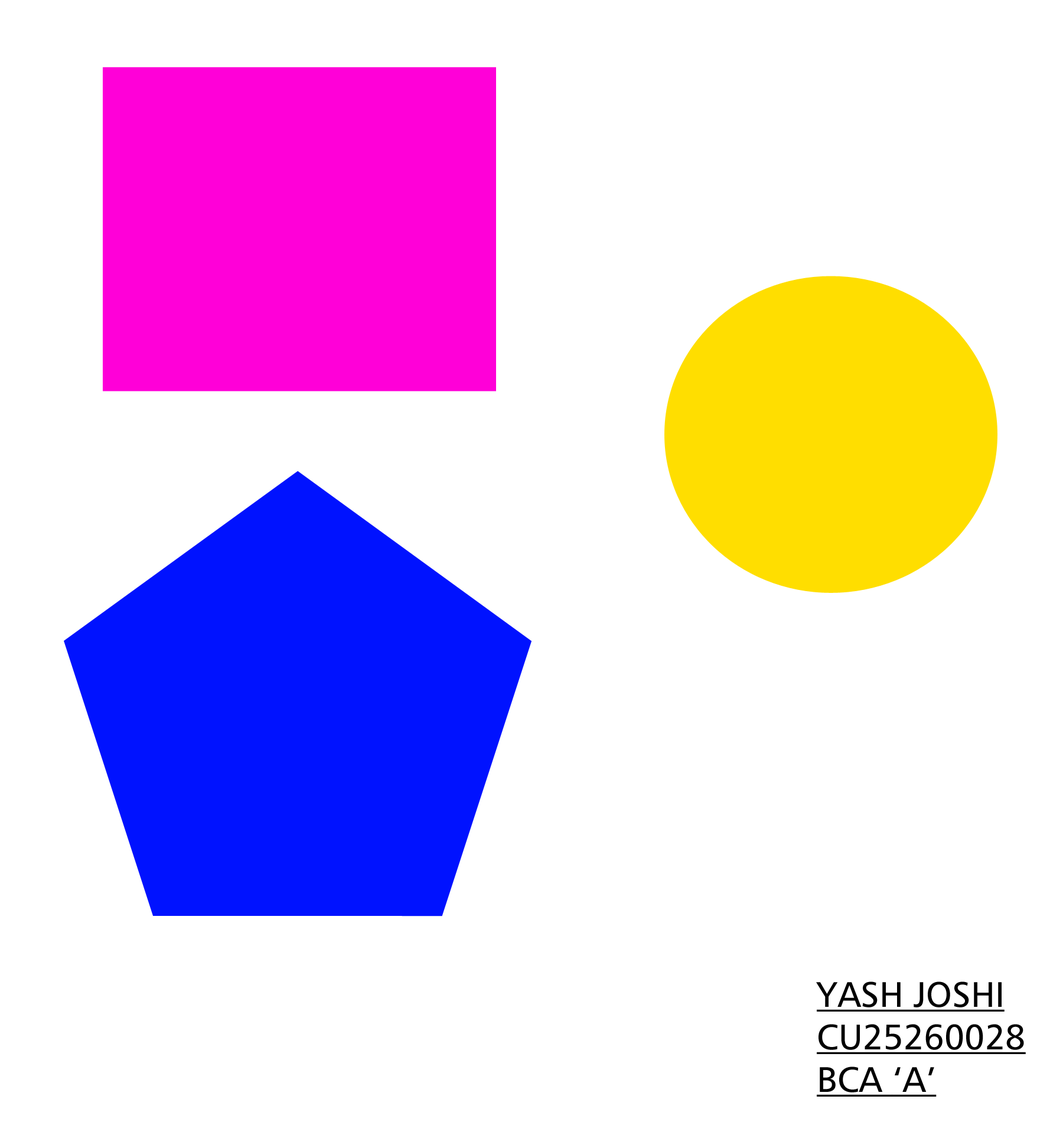
<style>
.page{position:relative;width:1063px;height:1122px;background:#ffffff}
.page>*{position:absolute;margin:0}
.t1{font:35.4px "Humanist777BT-RomanB";color:#000000;text-transform:uppercase;text-decoration:underline}
</style>
<div class="page">
<p class="t1" style="left:816px;top:981px;width:210px;height:116px">YASH JOSHI<br>CU25260028<br>BCA ‘A’</p>
</div>
